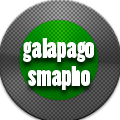
<style>
.page{position:relative;width:120px;height:120px;background:#ffffff}
.page>*{position:absolute;margin:0}
.t1{font:26px/14px "PoplarStd";color:#ffffff}
</style>
<div class="page">
<p class="t1" style="left:23px;top:38px;width:71px;height:52px;text-align:center">galapago<br><br>smapho</p>
</div>
